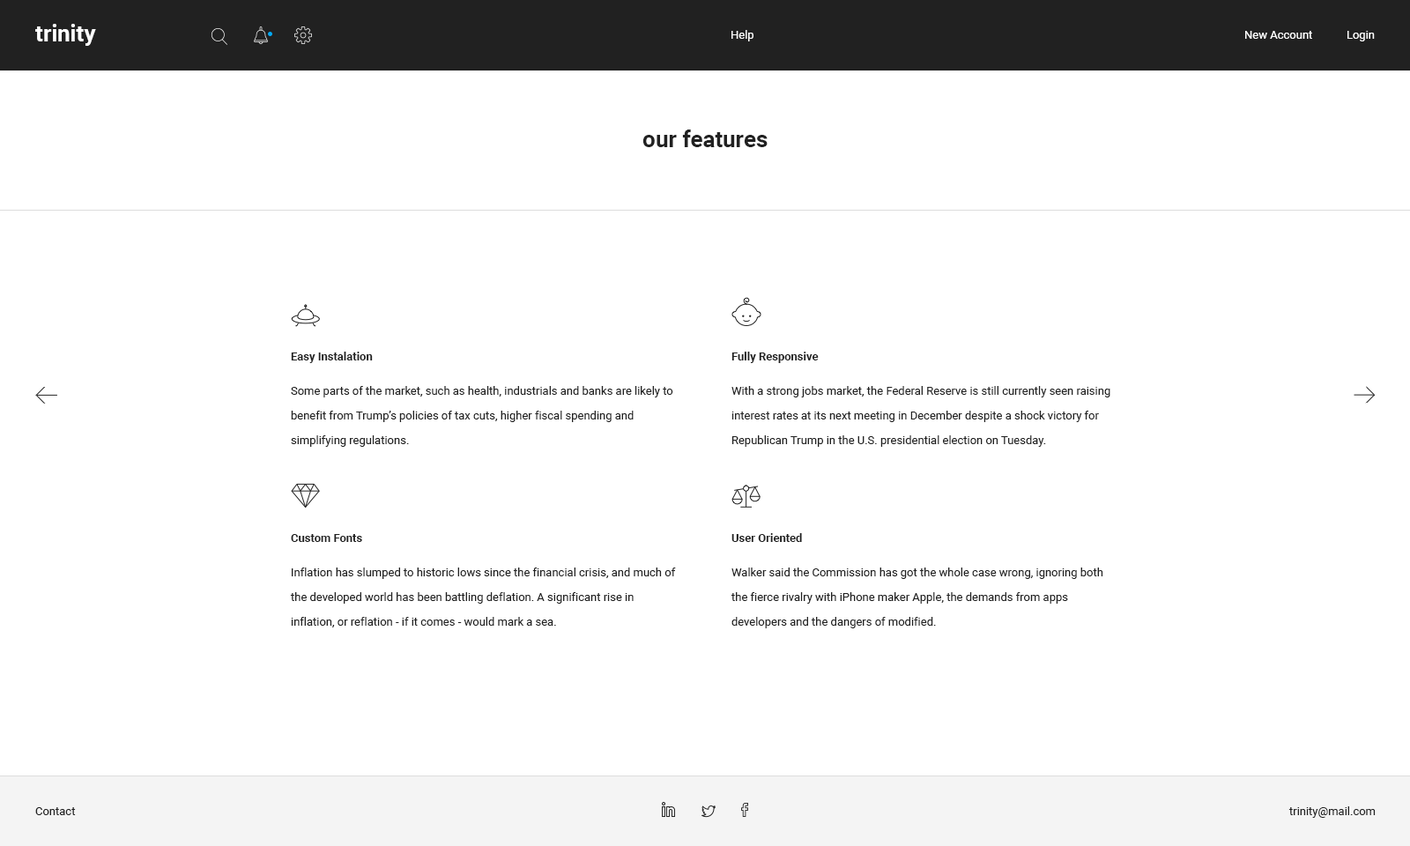
<style>
.page{position:relative;width:1410px;height:846px;background:#ffffff}
.page>*{position:absolute;margin:0}
.t1{font:22.9px "Roboto-Bold";color:#ffffff}
.t2{font:11.5px "Roboto-Regular";color:#ffffff}
.t3{font:22.9px "Roboto-Bold";color:#212121}
.t4{font:11.5px "Roboto-Bold";color:#212121}
.t5{font:11.5px/24.7px "Roboto-Regular";color:#212121}
.t6{font:11.5px "Roboto-Regular";color:#212121}
</style>
<div class="page">
<p class="t1" style="left:35px;top:24px;width:61px;height:22px">trinity</p>
<p class="t2" style="left:731px;top:30px;width:22px;height:11px">Help</p>
<p class="t2" style="left:1245px;top:31px;width:130px;height:10px">New Account            Login</p>
<p class="t3" style="left:642px;top:130px;width:125px;height:17px">our features</p>
<p class="t4" style="left:291px;top:352px;width:82px;height:11px">Easy Instalation</p>
<p class="t4" style="left:731px;top:352px;width:88px;height:11px">Fully Responsive</p>
<p class="t5" style="left:291px;top:386px;width:382px;height:61px">Some parts of the market, such as health, industrials and banks are likely to benefit from Trump’s policies of tax cuts, higher fiscal spending and <br>simplifying regulations.</p>
<p class="t5" style="left:731px;top:386px;width:379px;height:61px">With a strong jobs market, the Federal Reserve is still currently seen raising interest rates at its next meeting in December despite a shock victory for Republican Trump in the U.S. presidential election on Tuesday.</p>
<p class="t4" style="left:291px;top:534px;width:71px;height:8px">Custom Fonts</p>
<p class="t4" style="left:731px;top:533px;width:71px;height:9px">User Oriented</p>
<p class="t5" style="left:290px;top:567px;width:386px;height:60px">Inflation has slumped to historic lows since the financial crisis, and much of the developed world has been battling deflation. A significant rise in<br>inflation, or reflation - if it comes - would mark a sea.</p>
<p class="t5" style="left:730px;top:567px;width:373px;height:61px">Walker said the Commission has got the whole case wrong, ignoring both the fierce rivalry with iPhone maker Apple, the demands from apps <br>developers and the dangers of modified.</p>
<p class="t6" style="left:35px;top:807px;width:41px;height:8px">Contact</p>
<p class="t6" style="left:1288px;top:806px;width:87px;height:12px">trinity@mail.com</p>
</div>
